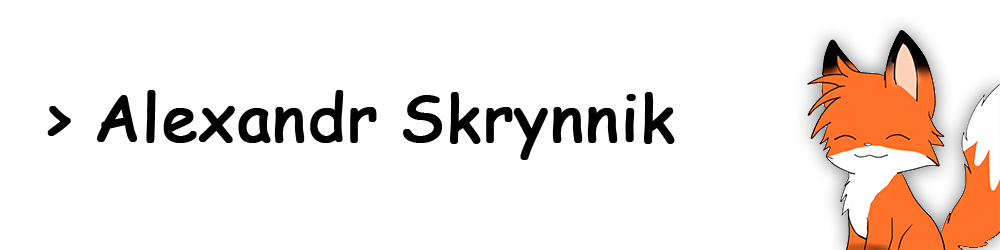
<style>
.page{position:relative;width:1000px;height:250px;background:#ffffff}
.page>*{position:absolute;margin:0}
.t1{font:64px "ComicSansMS";color:#000000;font-weight:bold}
</style>
<div class="page">
<p class="t1" style="left:47px;top:90px;width:628px;height:70px">&gt; Alexandr Skrynnik</p>
</div>
